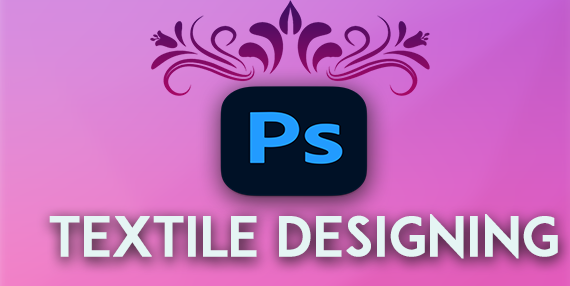
<style>
.page{position:relative;width:570px;height:286px}
.page>*{position:absolute;margin:0}
.t1{font:54.2px "ADAM.CGPRO";letter-spacing:-0.02em;color:#e5f5f4;font-weight:bold}
</style>
<div class="page">
<p class="t1" style="left:49px;top:214px;width:509px;height:45px">textile designing</p>
</div>
